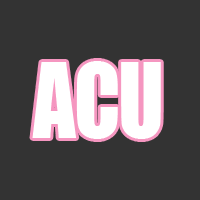
<style>
.page{position:relative;width:200px;height:200px;background:#333333}
.page>*{position:absolute;margin:0}
.t1{font:96px "Impact";letter-spacing:-0.02em;color:#ffffff;scale:0.87 1}
</style>
<div class="page">
<p class="t1" style="left:32px;top:61px;width:129px;height:78px">ACU</p>
</div>
